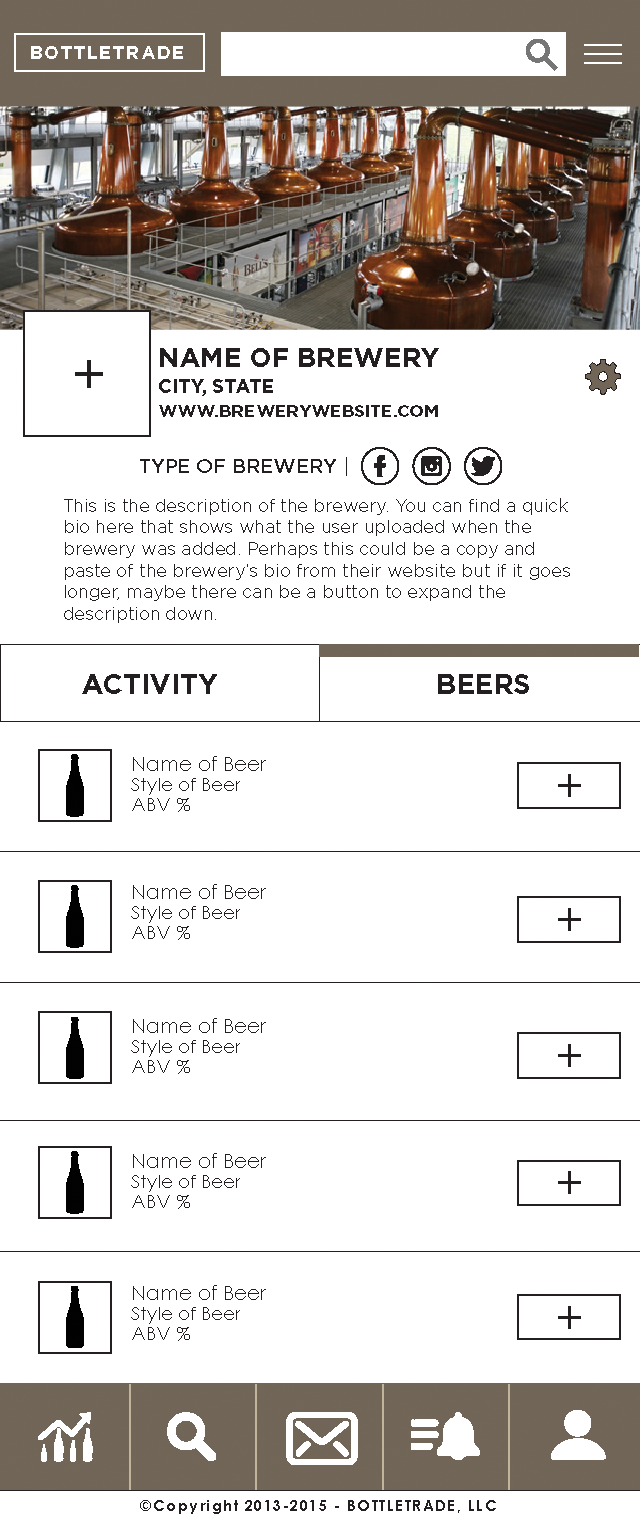
<style>
.page{position:relative;width:640px;height:1521px;background:#ffffff}
.page>*{position:absolute;margin:0}
.t1{font:18px "Gotham-Bold";letter-spacing:0.099em;color:#ffffff}
.t2{font:27px "Gotham-Bold";color:#231f20}
.t3{font:54px "CenturyGothic";color:#231f20}
.t4{font:19px "Gotham-Bold";color:#231f20}
.t5{font:17.1px "Gotham-Bold";color:#231f20}
.t6{font:20px "Gotham-Medium";color:#231f20}
.t7{font:18px "Gotham-Book";color:#231f20}
.t8{font:28px "Gotham-Bold";color:#231f20}
.t9{font:20px "CenturyGothic";color:#231f20}
.t10{font:46px "CenturyGothic";color:#231f20}
.t11{font:18px "CenturyGothic";color:#231f20}
.t12{font:15px "CenturyGothic-Bold";letter-spacing:0.099em;color:#231f20}
</style>
<div class="page">
<p class="t1" style="left:31px;top:46px;width:152px;height:13px">BOTTLETRADE</p>
<p class="t2" style="left:160px;top:348px;width:279px;height:19px">NAME OF BREWERY</p>
<p class="t3" style="left:75px;top:360px;width:28px;height:28px">+</p>
<p class="t4" style="left:159px;top:379px;width:114px;height:17px">CITY, STATE</p>
<p class="t5" style="left:159px;top:405px;width:279px;height:12px">WWW.BREWERYWEBSITE.COM</p>
<p class="t6" style="left:140px;top:457px;width:207px;height:19px">TYPE OF BREWERY |</p>
<p class="t7" style="left:64px;top:498px;width:506px;height:125px">This is the description of the brewery. You can find a quick bio here that shows what the user uploaded when the brewery was added. Perhaps this could be a copy and paste of the brewery’s bio from their website but if it goes longer, maybe there can be a button to expand the description down.</p>
<p class="t8" style="left:82px;top:674px;width:135px;height:20px">ACTIVITY</p>
<p class="t8" style="left:438px;top:674px;width:91px;height:20px">BEERS</p>
<p class="t9" style="left:133px;top:756px;width:133px;height:15px">Name of Beer</p>
<p class="t10" style="left:558px;top:774px;width:23px;height:23px">+</p>
<p class="t11" style="left:131px;top:778px;width:109px;height:17px">Style of Beer</p>
<p class="t11" style="left:132px;top:798px;width:58px;height:14px">ABV %</p>
<p class="t9" style="left:133px;top:884px;width:133px;height:15px">Name of Beer</p>
<p class="t11" style="left:131px;top:906px;width:109px;height:17px">Style of Beer</p>
<p class="t10" style="left:558px;top:908px;width:23px;height:23px">+</p>
<p class="t11" style="left:132px;top:926px;width:58px;height:14px">ABV %</p>
<p class="t9" style="left:133px;top:1018px;width:133px;height:15px">Name of Beer</p>
<p class="t11" style="left:131px;top:1040px;width:109px;height:17px">Style of Beer</p>
<p class="t10" style="left:558px;top:1044px;width:23px;height:23px">+</p>
<p class="t11" style="left:132px;top:1060px;width:58px;height:14px">ABV %</p>
<p class="t9" style="left:133px;top:1153px;width:133px;height:15px">Name of Beer</p>
<p class="t11" style="left:131px;top:1175px;width:109px;height:17px">Style of Beer</p>
<p class="t10" style="left:558px;top:1171px;width:23px;height:23px">+</p>
<p class="t11" style="left:132px;top:1195px;width:58px;height:14px">ABV %</p>
<p class="t9" style="left:133px;top:1285px;width:133px;height:15px">Name of Beer</p>
<p class="t11" style="left:131px;top:1307px;width:109px;height:17px">Style of Beer</p>
<p class="t10" style="left:558px;top:1306px;width:23px;height:23px">+</p>
<p class="t11" style="left:132px;top:1327px;width:58px;height:14px">ABV %</p>
<p class="t12" style="left:140px;top:1500px;width:356px;height:14px">©Copyright 2013-2015 - BOTTLETRADE, LLC</p>
</div>
